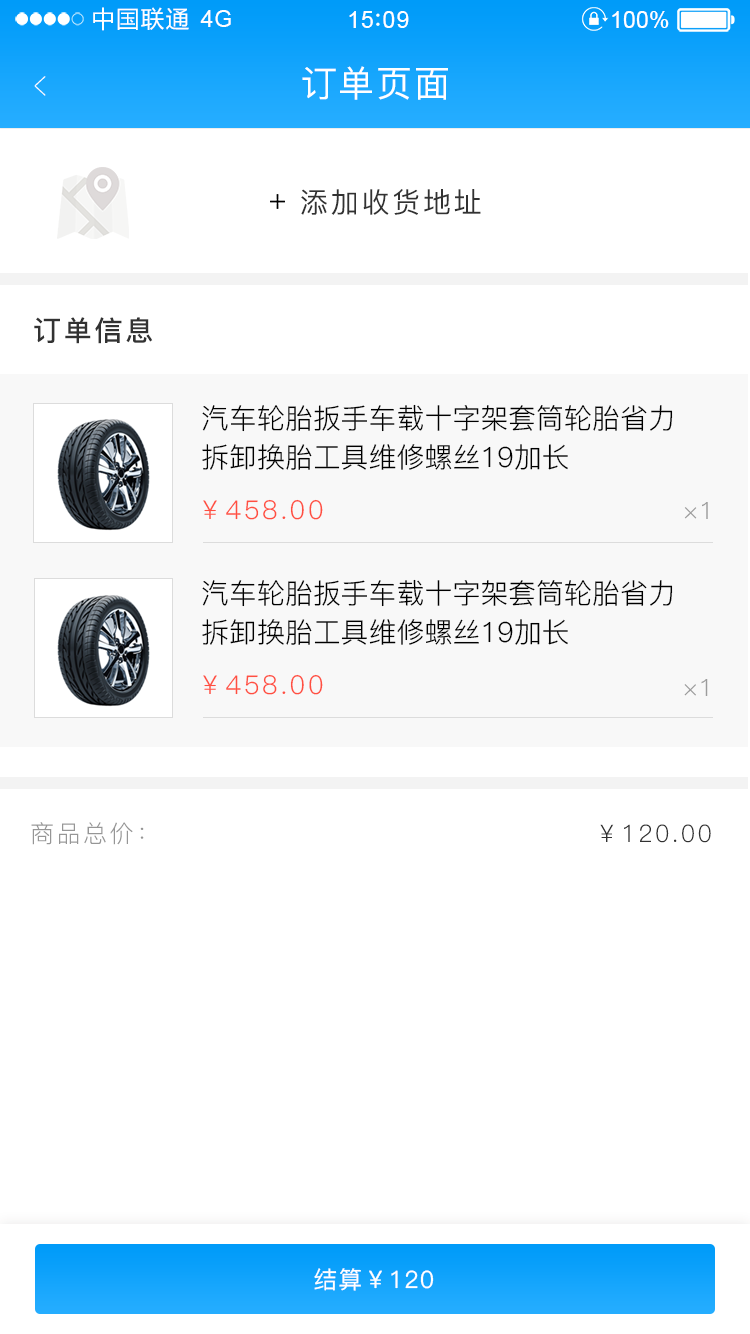
<style>
.page{position:relative;width:750px;height:1334px;background:#ffffff}
.page>*{position:absolute;margin:0}
.t1{font:23.4px "MicrosoftYaHei";letter-spacing:0.06em;color:#ffffff}
.t2{font:23.4px "ArialMT";letter-spacing:0.02em;color:#ffffff}
.t3{font:23.4px "ArialMT";letter-spacing:0.04em;color:#ffffff}
.t4{font:23.4px "ArialMT";color:#ffffff}
.t5{font:39px "PingFang-SC-ExtraLight";letter-spacing:0.1em;color:#ffffff;scale:0.51 1}
.t6{font:36px "PingFang-SC-Medium";letter-spacing:0.05em;color:#ffffff}
.t7{font:28px "PingFang-SC-Medium";letter-spacing:0.1em;color:#323232}
.t8{font:27.9px "PingFang-SC-Bold";letter-spacing:0.1em;color:#323232}
.t9{font:27.9px/38.9px "PingFang-SC-Regular";color:#000000}
.t10{font:26px "PingFang-SC-Regular";letter-spacing:0.1em;color:#ff4f41}
.t11{font:23.9px "PingFang-SC-Regular";letter-spacing:0.05em;color:#9c9c9c}
.t12{font:24px "PingFang-SC-Regular";letter-spacing:0.05em;color:#9c9c9c}
.t13{font:24.1px "PingFang-SC-Regular";letter-spacing:0.1em;color:#969696}
.t14{font:24.2px "PingFang-SC-Regular";letter-spacing:0.1em;color:#323232}
.t15{font:24px "PingFang-SC-Medium";letter-spacing:0.05em;color:#ffffff}
</style>
<div class="page">
<p class="t1" style="left:93px;top:7px;width:96px;height:24px">中国联通</p>
<p class="t2" style="left:200px;top:10px;width:31px;height:17px">4G</p>
<p class="t3" style="left:349px;top:11px;width:60px;height:17px">15 09</p>
<p class="t4" style="left:612px;top:11px;width:57px;height:17px">100%</p>
<p class="t5" style="left:34px;top:76px;width:12px;height:20px;rotate:180deg">&gt;</p>
<p class="t6" style="left:302px;top:66px;width:146px;height:34px">订单页面</p>
<p class="t7" style="left:301px;top:189px;width:180px;height:26px">添加收货地址</p>
<p class="t8" style="left:34px;top:317px;width:119px;height:27px">订单信息</p>
<p class="t9" style="left:202px;top:404px;width:471px;height:66px">汽车轮胎扳手车载十字架套筒轮胎省力<br>拆卸换胎工具维修螺丝19加长</p>
<p class="t10" style="left:203px;top:499px;width:120px;height:21px">￥458.00</p>
<p class="t11" style="left:684px;top:502px;width:24px;height:17px">×1</p>
<p class="t9" style="left:202px;top:579px;width:471px;height:66px">汽车轮胎扳手车载十字架套筒轮胎省力<br>拆卸换胎工具维修螺丝19加长</p>
<p class="t10" style="left:203px;top:674px;width:120px;height:21px">￥458.00</p>
<p class="t12" style="left:684px;top:679px;width:24px;height:17px">×1</p>
<p class="t13" style="left:31px;top:822px;width:113px;height:23px">商品总价：</p>
<p class="t14" style="left:600px;top:824px;width:111px;height:19px">￥120.00</p>
<p class="t15" style="left:314px;top:1268px;width:120px;height:23px">结算￥120</p>
</div>
